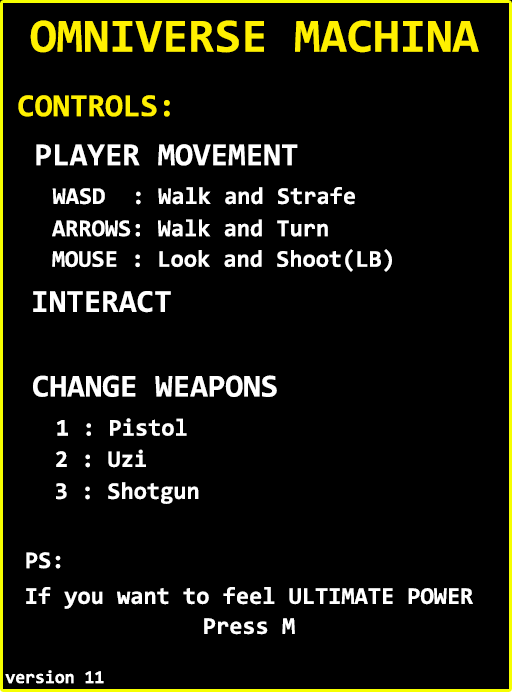
<style>
.page{position:relative;width:512px;height:692px;background:#000000}
.page>*{position:absolute;margin:0}
.t1{font:48px "Consolas-Bold";color:#fff000}
.t2{font:32px "Consolas-Bold";color:#fff000}
.t3{font:32px "Consolas-Bold";color:#ffffff}
.t4{font:24px "Consolas-Bold";color:#ffffff}
.t5{font:18px "Consolas-Bold";color:#ffffff}
</style>
<div class="page">
<p class="t1" style="left:30px;top:20px;width:449px;height:33px">OMNIVERSE MACHINA</p>
<p class="t2" style="left:18px;top:95px;width:152px;height:22px">CONTROLS:</p>
<p class="t3" style="left:36px;top:144px;width:262px;height:22px">PLAYER MOVEMENT</p>
<p class="t4" style="left:52px;top:187px;width:303px;height:18px">WASD  : Walk and Strafe</p>
<p class="t4" style="left:52px;top:219px;width:276px;height:18px">ARROWS: Walk and Turn</p>
<p class="t4" style="left:52px;top:249px;width:340px;height:23px">MOUSE : Look and Shoot(LB)</p>
<p class="t3" style="left:33px;top:291px;width:138px;height:22px">INTERACT</p>
<p class="t3" style="left:33px;top:375px;width:244px;height:22px">CHANGE WEAPONS</p>
<p class="t4" style="left:57px;top:418px;width:130px;height:18px">1 : Pistol</p>
<p class="t4" style="left:56px;top:449px;width:90px;height:19px">2 : Uzi</p>
<p class="t4" style="left:56px;top:482px;width:143px;height:22px">3 : Shotgun</p>
<p class="t4" style="left:26px;top:552px;width:35px;height:17px">PS:</p>
<p class="t4" style="left:26px;top:587px;width:447px;height:22px">If you want to feel ULTIMATE POWER</p>
<p class="t4" style="left:204px;top:618px;width:91px;height:17px">Press M</p>
<p class="t5" style="left:5px;top:670px;width:99px;height:14px">version 11</p>
</div>
